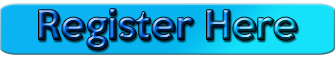
<style>
.page{position:relative;width:335px;height:58px}
.page>*{position:absolute;margin:0}
.t1{font:36px "KeepCalm-Medium"}
</style>
<div class="page">
<p class="t1" style="left:39px;top:9px;width:258px;height:40px">Register Here</p>
</div>
